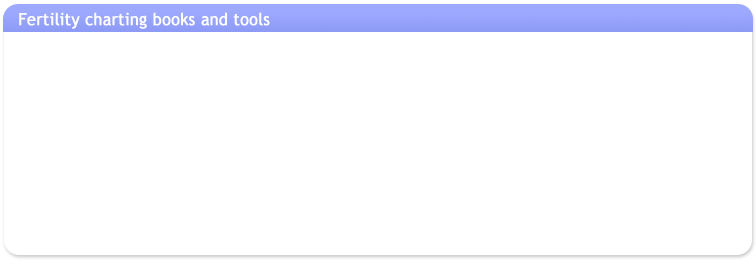
<style>
.page{position:relative;width:756px;height:264px;background:#ffffff}
.page>*{position:absolute;margin:0}
.t1{font:16.8px "TrebuchetMS";color:#ffffff;font-weight:bold;scale:0.95 1}
</style>
<div class="page">
<p class="t1" style="left:19px;top:12px;width:251px;height:17px">Fertility charting books and tools</p>
</div>
